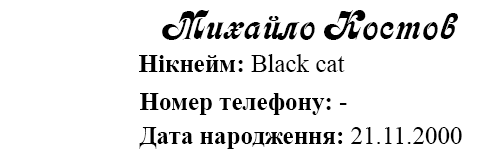
<style>
.page{position:relative;width:480px;height:160px;background:#ffffff}
.page>*{position:absolute;margin:0}
.t1{font:41.7px "Asessor";color:#000000}
.t2{font:25px "TimesNewRomanPSMT";color:#000000}
.t3{font:25px "TimesNewRomanPS-BoldMT";color:#000000}
</style>
<div class="page">
<p class="t1" style="left:162px;top:10px;width:296px;height:30px">Михайло Костов</p>
<p class="t2" style="left:139px;top:54px;width:206px;height:18px"><span class="t3">Нікнейм: </span>Black cat</p>
<p class="t3" style="left:140px;top:93px;width:207px;height:22px">Номер телефону: <span class="t2">-</span></p>
<p class="t3" style="left:139px;top:127px;width:323px;height:22px">Дата народження: <span class="t2">21.11.2000</span></p>
</div>
